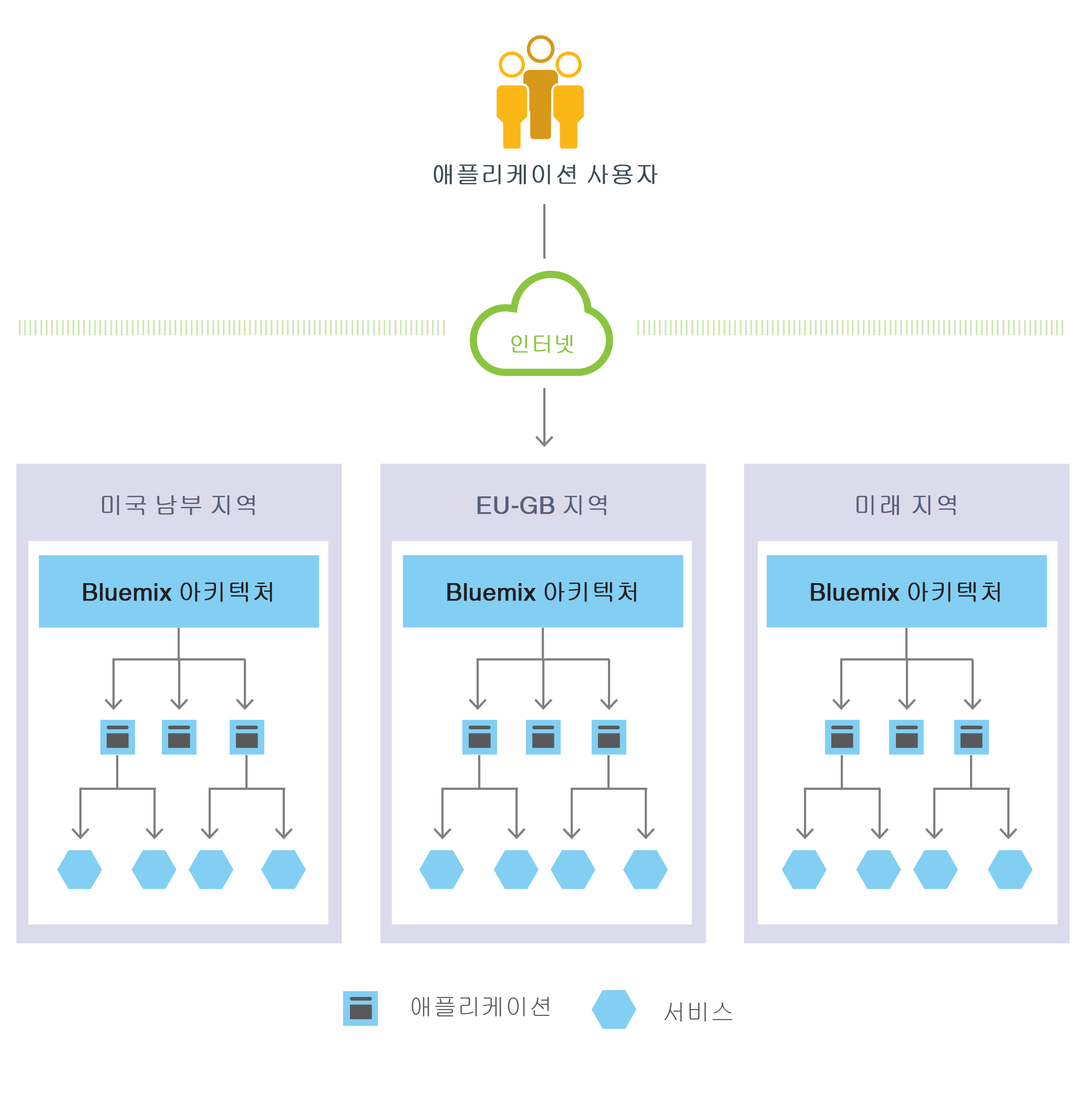
<style>
.page{position:relative;width:1084px;height:1100px;background:#ffffff}
.page>*{position:absolute;margin:0}
.t1{font:24.1px "Gulim";color:#3b4b54;font-weight:bold}
.t2{font:21.9px "Gulim";color:#8ac540;font-weight:bold}
.t3{font:24.1px "Gulim";color:#58607a;font-weight:bold}
.t4{font:24.1px "IBMHelv";color:#58607a;font-weight:bold}
.t5{font:24.1px "IBMHelv";color:#231f20;font-weight:bold}
.t6{font:24.1px "Gulim";color:#231f20;font-weight:bold}
.t7{font:24.1px "Gulim";color:#59595c}
</style>
<div class="page">
<p class="t1" style="left:434px;top:165px;width:224px;height:19px">애플리케이션 사용자</p>
<p class="t2" style="left:511px;top:335px;width:62px;height:18px">인터넷</p>
<p class="t3" style="left:102px;top:495px;width:153px;height:20px">미국 남부 지역</p>
<p class="t4" style="left:477px;top:495px;width:130px;height:20px">EU-GB <span class="t3">지역</span></p>
<p class="t3" style="left:857px;top:495px;width:99px;height:20px">미래 지역</p>
<p class="t5" style="left:83px;top:582px;width:189px;height:20px">Bluemix <span class="t6">아키텍처</span></p>
<p class="t5" style="left:447px;top:582px;width:190px;height:20px">Bluemix <span class="t6">아키텍처</span></p>
<p class="t5" style="left:811px;top:582px;width:189px;height:20px">Bluemix <span class="t6">아키텍처</span></p>
<p class="t7" style="left:412px;top:997px;width:138px;height:19px">애플리케이션</p>
<p class="t7" style="left:664px;top:1002px;width:69px;height:19px">서비스</p>
</div>
